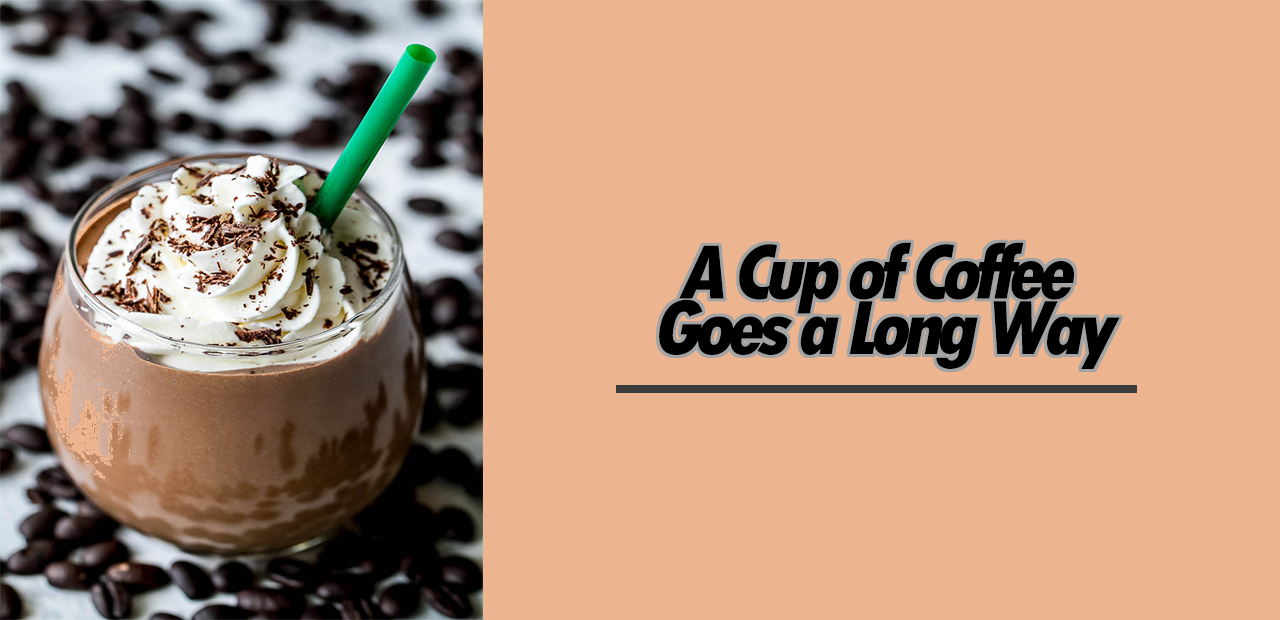
<style>
.page{position:relative;width:1280px;height:620px;background:#ecb590}
.page>*{position:absolute;margin:0}
.t1{font:81px/55.4px "TwCenMT-CondensedExtraBold";letter-spacing:-0.08em;color:#000000;font-style:italic;scale:1.07 1}
</style>
<div class="page">
<p class="t1" style="left:659px;top:242px;width:461px;height:127px;text-align:center">A Cup of Coffee <br>Goes a Long Way</p>
</div>
